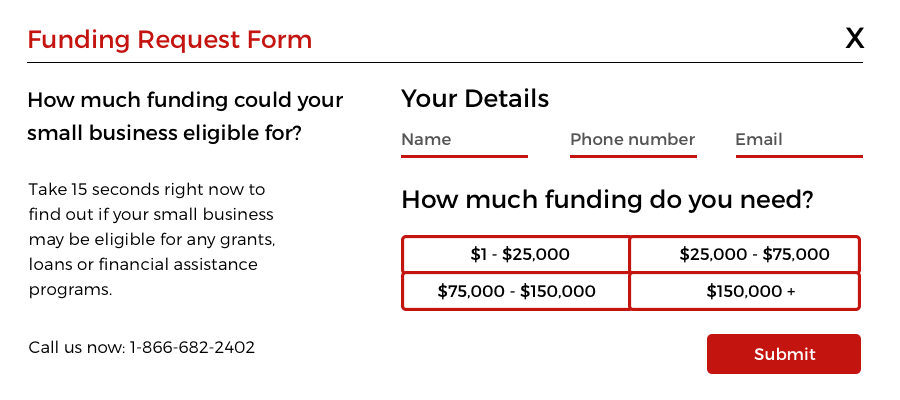
<style>
.page{position:relative;width:900px;height:400px;background:#ffffff}
.page>*{position:absolute;margin:0}
.t1{font:25px "Montserrat-Regular";color:#c41410}
.t2{font:29.2px "Montserrat-Regular";color:#010101}
.t3{font:25px "Montserrat-Regular";color:#000000}
.t4{font:20.8px/33.3px "Montserrat-Regular";color:#000000}
.t5{font:16.7px "Montserrat-Regular";color:#545454}
.t6{font:16.7px/25px "Montserrat-Light";color:#000000}
.t7{font:16.7px/29.2px "Montserrat-Light";color:#000000}
.t8{font:16.7px "Montserrat-Regular";color:#000000}
.t9{font:16.7px "Montserrat-Regular";color:#ffffff}
</style>
<div class="page">
<p class="t1" style="left:29px;top:29px;width:282px;height:24px">Funding Request Form</p>
<p class="t2" style="left:845px;top:27px;width:20px;height:21px">X</p>
<p class="t3" style="left:401px;top:88px;width:148px;height:20px">Your Details</p>
<p class="t4" style="left:27px;top:91px;width:316px;height:54px">How much funding could your <br>small business eligible for?</p>
<p class="t5" style="left:402px;top:133px;width:49px;height:12px">Name</p>
<p class="t5" style="left:571px;top:132px;width:124px;height:13px">Phone number</p>
<p class="t5" style="left:736px;top:132px;width:46px;height:14px">Email</p>
<p class="t6" style="left:28px;top:182px;width:247px;height:172px">Take 15 seconds right now to find out if your small business may be eligible for any grants, loans or financial assistance programs.<br><span class="t7"><br>Call us now: 1-866-682-2402</span></p>
<p class="t3" style="left:403px;top:189px;width:410px;height:24px">How much funding do you need?</p>
<p class="t8" style="left:471px;top:246px;width:99px;height:17px">$1 - $25,000</p>
<p class="t8" style="left:680px;top:246px;width:150px;height:17px">$25,000 - $75,000</p>
<p class="t8" style="left:438px;top:283px;width:158px;height:17px">$75,000 - $150,000</p>
<p class="t8" style="left:707px;top:283px;width:88px;height:17px">$150,000 +</p>
<p class="t9" style="left:754px;top:347px;width:62px;height:13px">Submit</p>
</div>
